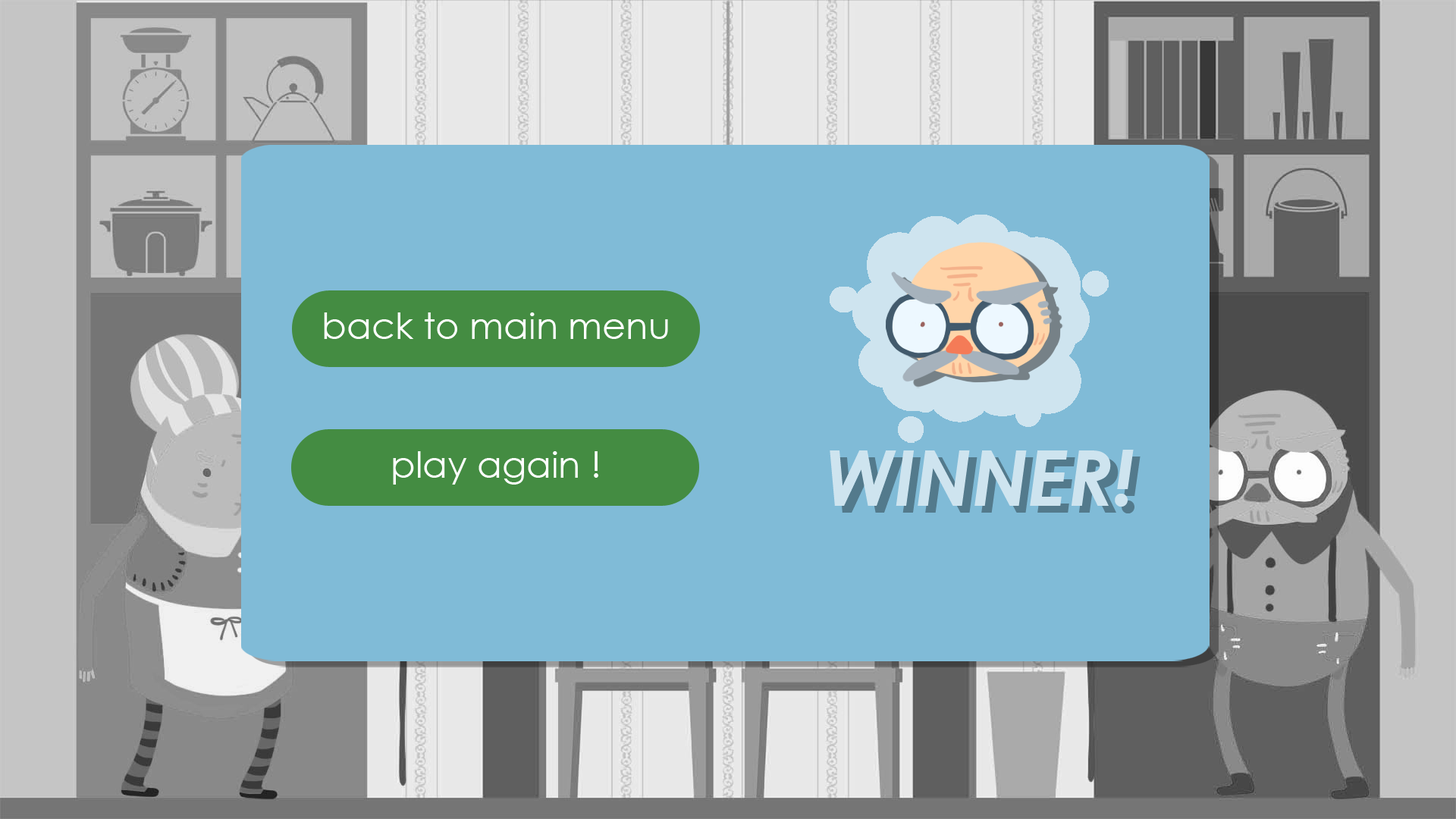
<style>
.page{position:relative;width:1456px;height:819px;background:#80bbd7}
.page>*{position:absolute;margin:0}
.t1{font:36.4px "CenturyGothic";color:#ffffff}
.t2{font:76.6px "CenturyGothic-BoldItalic";color:#cee4ef}
.t3{font:76.6px "CenturyGothic-BoldItalic"}
</style>
<div class="page">
<p class="t1" style="left:324px;top:312px;width:344px;height:27px">back to main menu</p>
<p class="t2" style="left:830px;top:450px;width:304px;height:57px">WINNER!</p>
<p class="t1" style="left:393px;top:451px;width:205px;height:34px">play again !</p>
<p class="t3" style="left:837px;top:457px;width:304px;height:56px">WINNER!</p>
</div>
